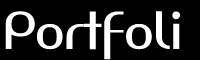
<style>
.page{position:relative;width:200px;height:60px;background:#000000}
.page>*{position:absolute;margin:0}
.t1{font:50px "AmerikaSans";color:#ffffff}
</style>
<div class="page">
<p class="t1" style="left:5px;top:11px;width:175px;height:49px">Portfoli</p>
</div>
